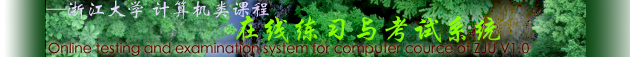
<style>
.page{position:relative;width:630px;height:57px}
.page>*{position:absolute;margin:0}
.t1{font:20px "STXinwei";color:#e2d9fc}
.t2{font:30px "STXingkai";color:#88fa02}
.t3{font:14px "STXihei";color:#580000}
</style>
<div class="page">
<p class="t1" style="left:46px;top:0px;width:223px;height:19px">—浙江大学 计算机类课程</p>
<p class="t2" style="left:236px;top:15px;width:265px;height:28px">在线练习与考试系统</p>
<p class="t3" style="left:48px;top:42px;width:481px;height:14px">Online testing and examination system for computer cource of ZJU V1.0</p>
</div>
